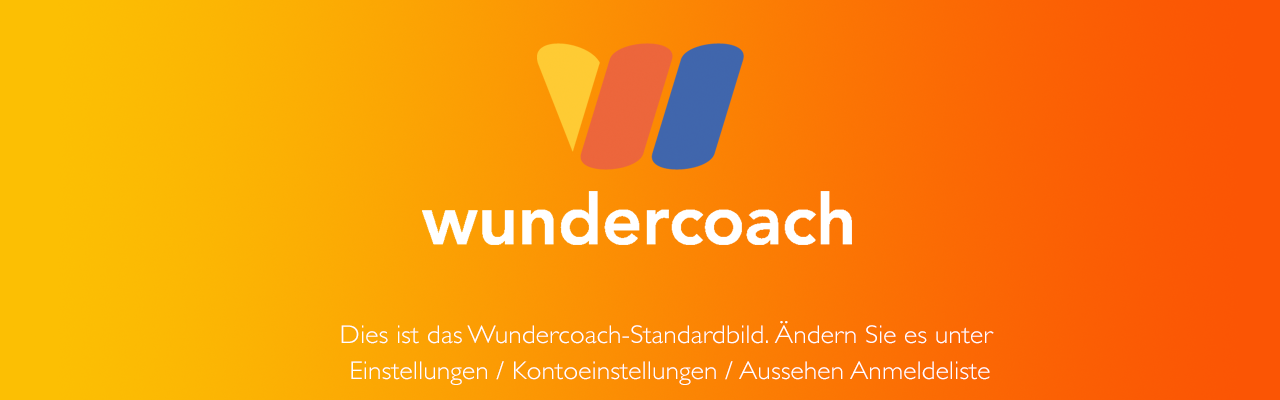
<style>
.page{position:relative;width:1280px;height:400px}
.page>*{position:absolute;margin:0}
.t1{font:25.8px "GillSans-Light";color:#ffffff;scale:1.07 1}
</style>
<div class="page">
<p class="t1" style="left:341px;top:321px;width:653px;height:64px;text-align:center">Dies ist das Wundercoach-Standardbild. Ändern Sie es unter <br>Einstellungen / Kontoeinstellungen / Aussehen Anmeldeliste</p>
</div>
